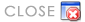
<style>
.page{position:relative;width:85px;height:22px;background:#ffffff}
.page>*{position:absolute;margin:0}
.t1{font:14px "CenturyGothic";letter-spacing:0.075em;color:#a7a7a7;text-transform:uppercase;font-weight:bold}
</style>
<div class="page">
<p class="t1" style="left:4px;top:5px;width:51px;height:12px">close</p>
</div>
